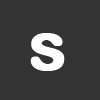
<style>
.page{position:relative;width:100px;height:100px;background:#333333}
.page>*{position:absolute;margin:0}
.t1{font:67.6px "ArialRoundedMTBold";letter-spacing:0.1em;color:#ffffff;font-weight:bold}
</style>
<div class="page">
<p class="t1" style="left:30px;top:33px;width:35px;height:38px">s</p>
</div>
